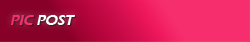
<style>
.page{position:relative;width:250px;height:42px;background:#f62e6e}
.page>*{position:absolute;margin:0}
.t1{font:14.7px "ErasITC-Demi";color:#ffffff;font-style:italic}
.t2{font:14.7px "ErasITC-Demi";color:#f62e6e;font-style:italic}
</style>
<div class="page">
<p class="t1" style="left:11px;top:15px;width:64px;height:10px"><span class="t2">PIC</span> POST</p>
</div>
